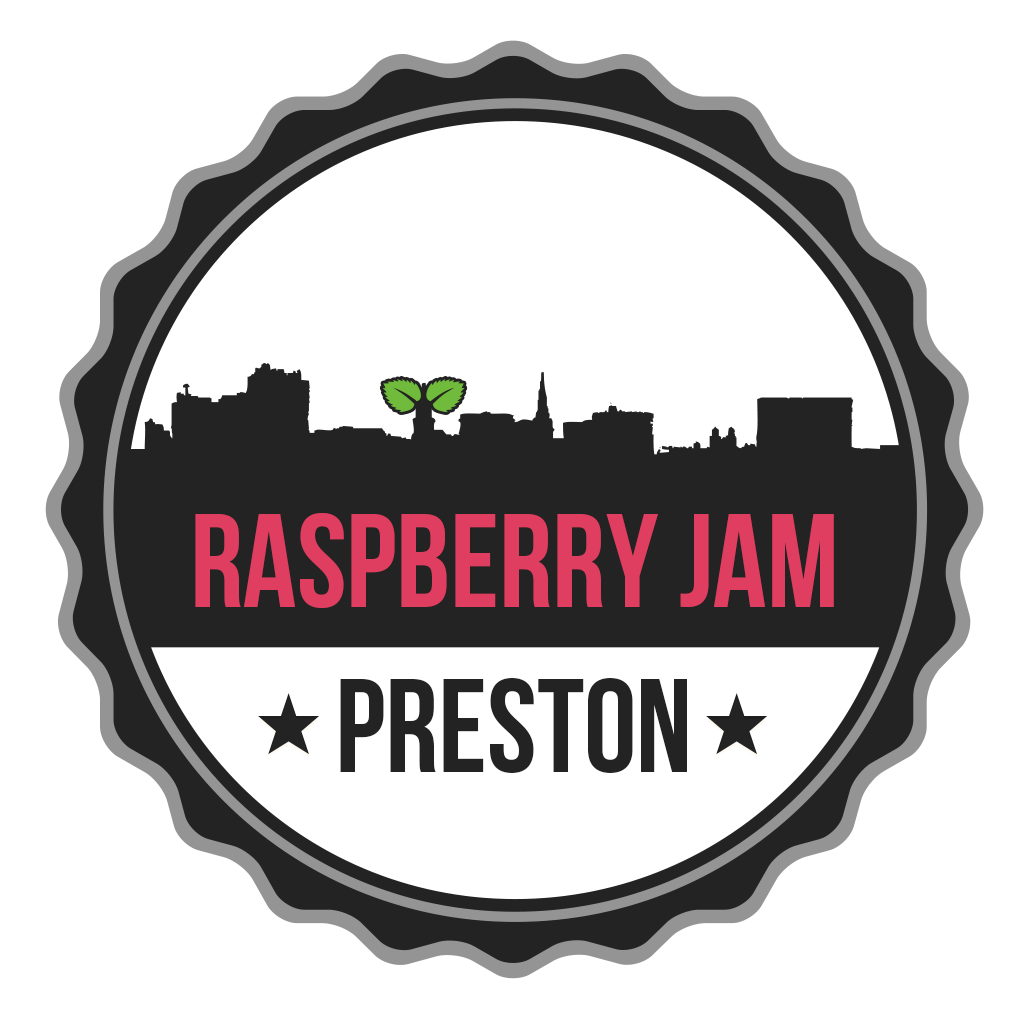
<style>
.page{position:relative;width:1024px;height:1024px;background:#ffffff}
.page>*{position:absolute;margin:0}
.t1{font:132.6px "BebasNeue";color:#e03e61}
.t2{font:132.6px "BebasNeue";color:#232323}
</style>
<div class="page">
<p class="t1" style="left:195px;top:513px;width:639px;height:95px">RASPBERRY JAM</p>
<p class="t2" style="left:340px;top:678px;width:347px;height:95px">PRESTON</p>
</div>
